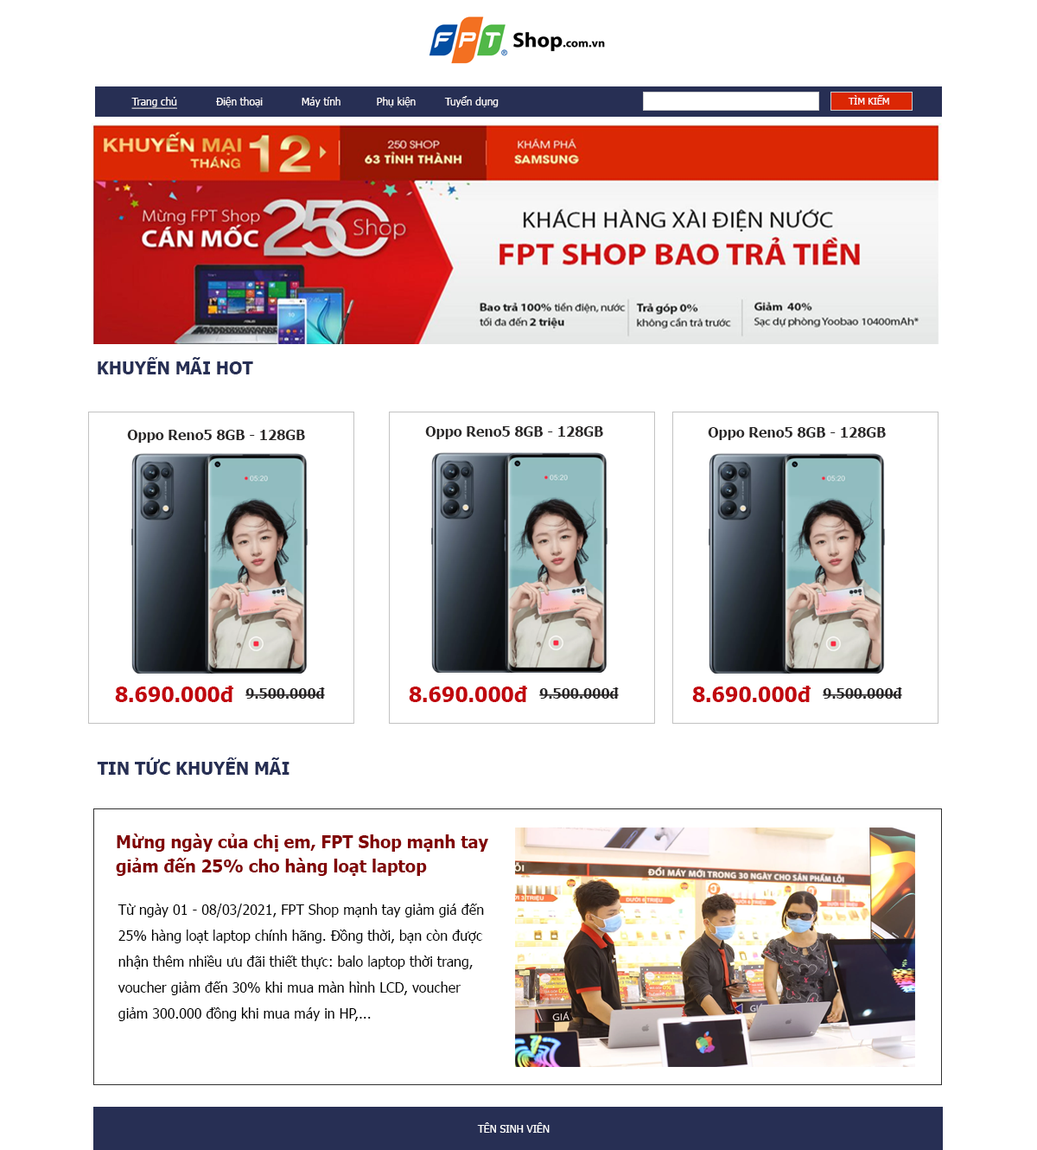
<style>
.page{position:relative;width:1037px;height:1150px;background:#ffffff}
.page>*{position:absolute;margin:0}
.t1{font:10.4px "Tahoma";color:#fefbfb}
.t2{font:10.4px "Tahoma";color:#fefbfb;text-decoration:underline}
.t3{font:9.5px "Tahoma";color:#fefbfb}
.t4{font:17.3px "Tahoma-Bold";color:#272f54}
.t5{font:13.8px "Tahoma-Bold";color:#2a2828}
.t6{font:20.7px "Tahoma-Bold";color:#c1080f}
.t7{font:13.8px "Tahoma-Bold";color:#262324}
.t8{font:17.3px/24.2px "Tahoma-Bold";color:#810303}
.t9{font:13.8px/25.9px "Tahoma";color:#000000}
.t10{font:10.4px "Tahoma";color:#ffffff}
</style>
<div class="page">
<p class="t1" style="left:131px;top:96px;width:368px;height:13px"><span class="t2">Trang chủ</span>            Điện thoại            Máy tính           Phụ kiện         Tuyển dụng</p>
<p class="t3" style="left:848px;top:95px;width:41px;height:10px">TÌM KIẾM</p>
<p class="t4" style="left:98px;top:357px;width:155px;height:17px">KHUYẾN MÃI HOT</p>
<p class="t5" style="left:127px;top:430px;width:178px;height:13px">Oppo Reno5 8GB - 128GB</p>
<p class="t5" style="left:425px;top:426px;width:178px;height:13px">Oppo Reno5 8GB - 128GB</p>
<p class="t5" style="left:708px;top:427px;width:178px;height:13px">Oppo Reno5 8GB - 128GB</p>
<p class="t6" style="left:115px;top:685px;width:118px;height:17px">8.690.000đ</p>
<p class="t7" style="left:245px;top:687px;width:80px;height:11px">9.500.000đ</p>
<p class="t6" style="left:409px;top:685px;width:118px;height:17px">8.690.000đ</p>
<p class="t7" style="left:539px;top:687px;width:80px;height:11px">9.500.000đ</p>
<p class="t6" style="left:692px;top:685px;width:119px;height:17px">8.690.000đ</p>
<p class="t7" style="left:823px;top:687px;width:79px;height:11px">9.500.000đ</p>
<p class="t4" style="left:97px;top:757px;width:193px;height:17px">TIN TỨC KHUYẾN MÃI</p>
<p class="t8" style="left:116px;top:833px;width:372px;height:43px">Mừng ngày của chị em, FPT Shop mạnh tay <br>giảm đến 25% cho hàng loạt laptop</p>
<p class="t9" style="left:118px;top:903px;width:366px;height:118px">Từ ngày 01 - 08/03/2021, FPT Shop mạnh tay giảm giá đến <br>25% hàng loạt laptop chính hãng. Đồng thời, bạn còn được <br>nhận thêm nhiều ưu đãi thiết thực: balo laptop thời trang, <br>voucher giảm đến 30% khi mua màn hình LCD, voucher <br>giảm 300.000 đồng khi mua máy in HP,...</p>
<p class="t10" style="left:477px;top:1122px;width:73px;height:10px">TÊN SINH VIÊN</p>
</div>
